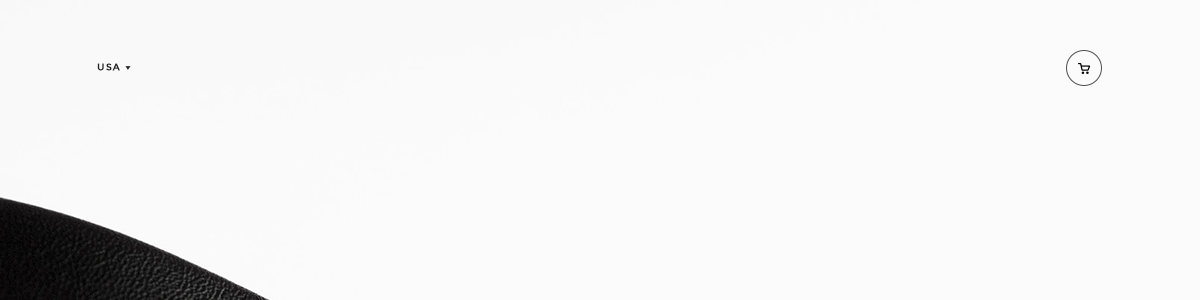
<style>
.page{position:relative;width:1200px;height:300px;background:#fbfbfb}
.page>*{position:absolute;margin:0}
.t1{font:10px "Montserrat-Bold";letter-spacing:0.08em;color:#242526}
</style>
<div class="page">
<p class="t1" style="left:97px;top:63px;width:23px;height:8px">USA</p>
</div>
